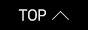
<style>
.page{position:relative;width:88px;height:30px;background:#000000}
.page>*{position:absolute;margin:0}
.t1{font:15px "NanumSquareR";color:#ffffff}
</style>
<div class="page">
<p class="t1" style="left:18px;top:9px;width:28px;height:12px">TOP</p>
</div>
